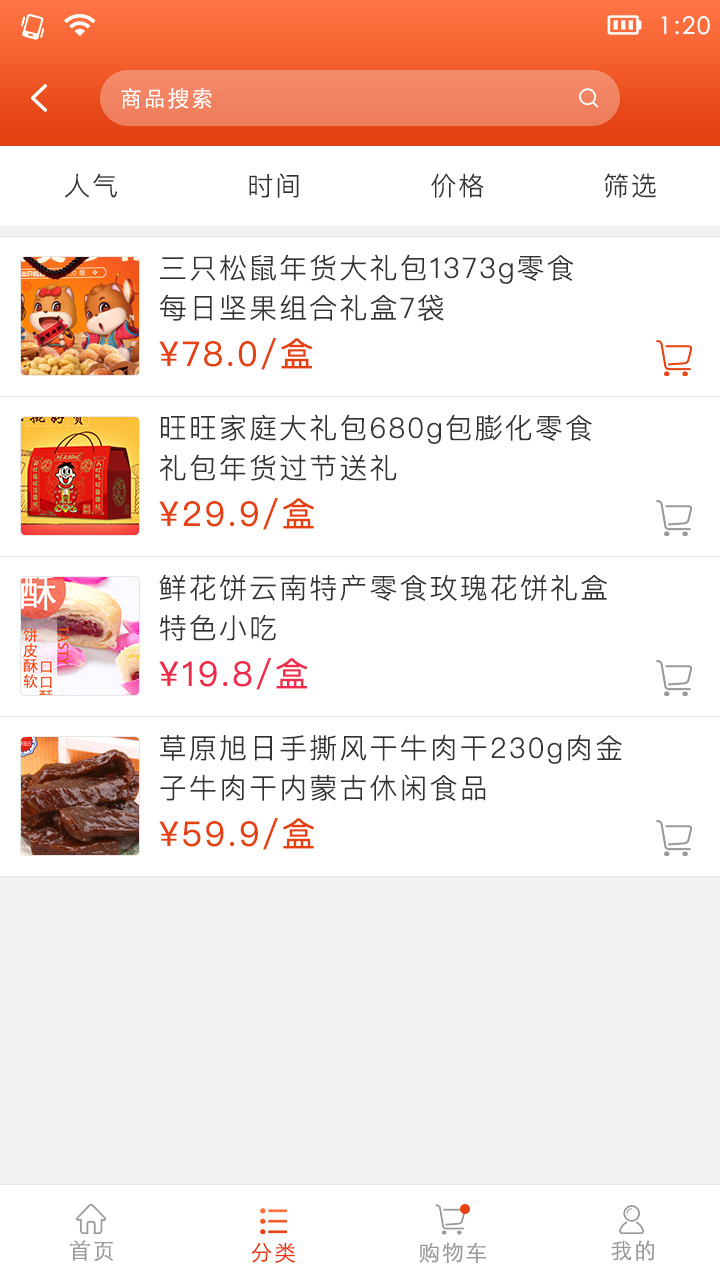
<style>
.page{position:relative;width:720px;height:1280px;background:#ffffff}
.page>*{position:absolute;margin:0}
.t1{font:24px "STXihei";letter-spacing:0.075em;color:#ffffff}
.t2{font:22px "STHeitiSC-Light";letter-spacing:0.075em;color:#ffffff}
.t3{font:26px "PingFangSC-Light";letter-spacing:0.075em;color:#333333}
.t4{font:28px/40px "PingFangSC-Light";letter-spacing:0.075em;color:#333333}
.t5{font:34px "PingFangSC-Regular";letter-spacing:0.075em;color:#e44010}
.t6{font:34px "PingFangSC-Regular";letter-spacing:0.075em;color:#ef2a4b}
.t7{font:22px "STHeitiSC-Light";letter-spacing:0.075em;color:#999999}
.t8{font:22px "STHeitiSC-Light";letter-spacing:0.075em;color:#e5370f}
</style>
<div class="page">
<p class="t1" style="left:661px;top:16px;width:49px;height:19px">1:20</p>
<p class="t2" style="left:121px;top:88px;width:91px;height:21px">商品搜索</p>
<p class="t3" style="left:65px;top:173px;width:591px;height:25px">人气            时间            价格           筛选</p>
<p class="t4" style="left:160px;top:254px;width:414px;height:67px">三只松鼠年货大礼包1373g零食<br>每日坚果组合礼盒7袋</p>
<p class="t5" style="left:159px;top:338px;width:154px;height:32px">¥78.0/盒</p>
<p class="t4" style="left:160px;top:414px;width:432px;height:67px">旺旺家庭大礼包680g包膨化零食<br>礼包年货过节送礼</p>
<p class="t5" style="left:159px;top:498px;width:156px;height:32px">¥29.9/盒</p>
<p class="t4" style="left:159px;top:574px;width:448px;height:67px">鲜花饼云南特产零食玫瑰花饼礼盒<br>特色小吃</p>
<p class="t6" style="left:159px;top:658px;width:149px;height:32px">¥19.8/盒</p>
<p class="t4" style="left:160px;top:734px;width:462px;height:67px">草原旭日手撕风干牛肉干230g肉金<br>子牛肉干内蒙古休闲食品</p>
<p class="t5" style="left:159px;top:818px;width:156px;height:32px">¥59.9/盒</p>
<p class="t7" style="left:70px;top:1240px;width:43px;height:22px">首页</p>
<p class="t7" style="left:611px;top:1240px;width:43px;height:21px">我的</p>
<p class="t8" style="left:251px;top:1242px;width:44px;height:21px">分类</p>
<p class="t7" style="left:419px;top:1242px;width:67px;height:21px">购物车</p>
</div>
